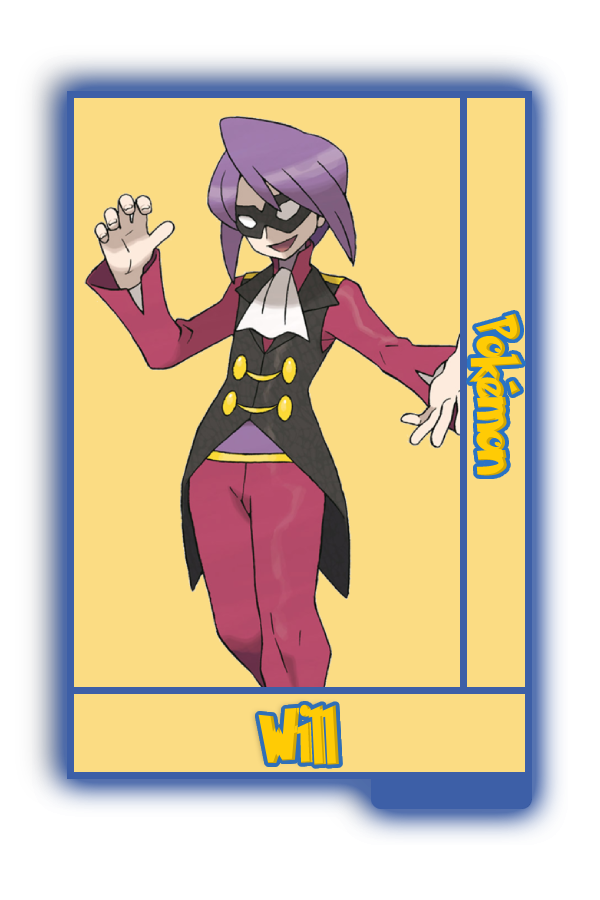
<style>
.page{position:relative;width:600px;height:900px;background:#fbdc83}
.page>*{position:absolute;margin:0}
.t1{font:48.8px "PokemonSolidNormal";color:#ffcb05;scale:0.8 1}
.t2{font:56.6px "PokemonSolidNormal";color:#ffcb05;scale:0.92 1}
</style>
<div class="page">
<p class="t1" style="left:469px;top:313px;width:54px;height:163px;rotate:90deg">Pokémon</p>
<p class="t2" style="left:258px;top:704px;width:81px;height:61px">Will</p>
</div>
